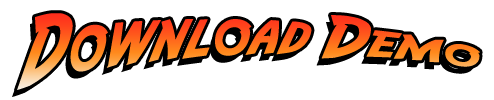
<style>
.page{position:relative;width:494px;height:100px;background:#ffffff}
.page>*{position:absolute;margin:0}
.t1{font:60px "Adventure";letter-spacing:-0.075em}
.t2{font:72px "Adventure";letter-spacing:-0.075em}
</style>
<div class="page">
<p class="t1" style="left:17px;top:13px;width:463px;height:77px"><span class="t2">D</span>ownload <span class="t2">D</span>emo</p>
</div>
